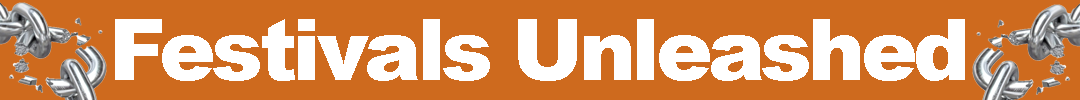
<style>
.page{position:relative;width:1080px;height:100px;background:#ce6a1e}
.page>*{position:absolute;margin:0}
.t1{font:85px "Arial-Black";letter-spacing:-0.05em;color:#ffffff}
</style>
<div class="page">
<p class="t1" style="left:115px;top:19px;width:850px;height:62px">Festivals Unleashed</p>
</div>
